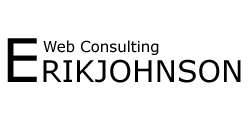
<style>
.page{position:relative;width:250px;height:121px;background:#ffffff}
.page>*{position:absolute;margin:0}
.t1{font:30px "Verdana";color:#000000}
.t2{font:60px "Verdana";color:#000000}
.t3{font:15px "Verdana";color:#000000}
</style>
<div class="page">
<p class="t1" style="left:7px;top:38px;width:234px;height:45px"><span class="t2">E</span>RIKJOHNSON</p>
<p class="t3" style="left:43px;top:40px;width:116px;height:15px">Web Consulting</p>
</div>
